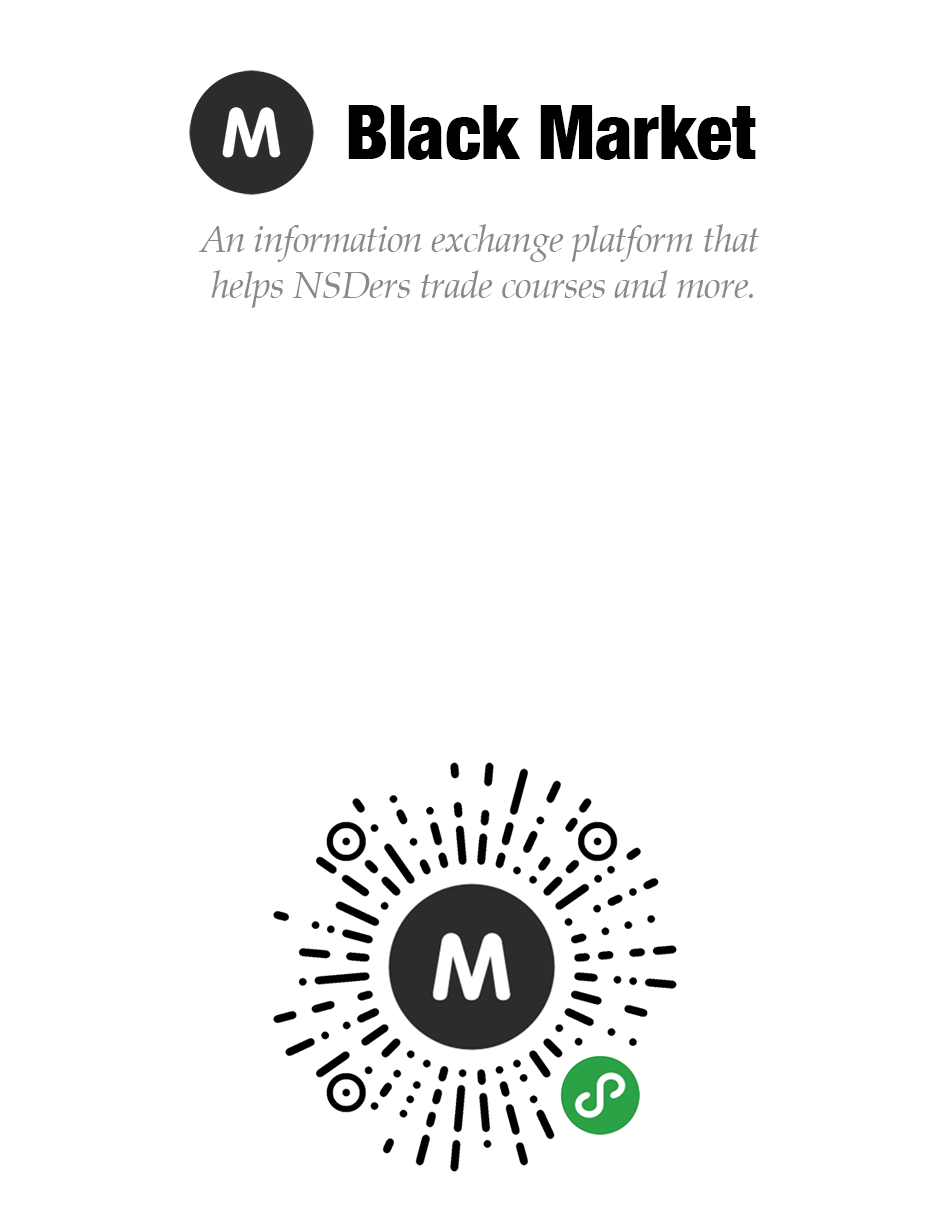
<style>
.page{position:relative;width:945px;height:1216px;background:#ffffff}
.page>*{position:absolute;margin:0}
.t1{font:75px "HelveticaNeue-CondensedBlack";color:#000000}
.t2{font:37.5px/45.8px "Palatino-Italic";letter-spacing:-0.01em;color:#898989}
</style>
<div class="page">
<p class="t1" style="left:348px;top:105px;width:408px;height:55px">Black Market</p>
<p class="t2" style="left:199px;top:224px;width:561px;height:84px;text-align:center">An information exchange platform that <br>helps NSDers trade courses and more.</p>
</div>
